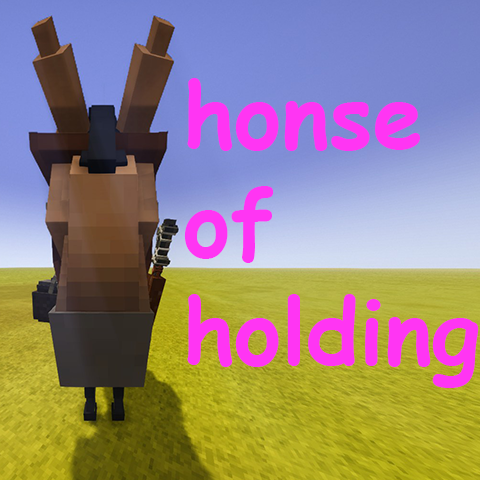
<style>
.page{position:relative;width:480px;height:480px}
.page>*{position:absolute;margin:0}
.t1{font:90px "ComicSansMS-Bold";color:#ff35f3}
</style>
<div class="page">
<p class="t1" style="left:184px;top:78px;width:295px;height:310px">honse<br>of<br>holding</p>
</div>
